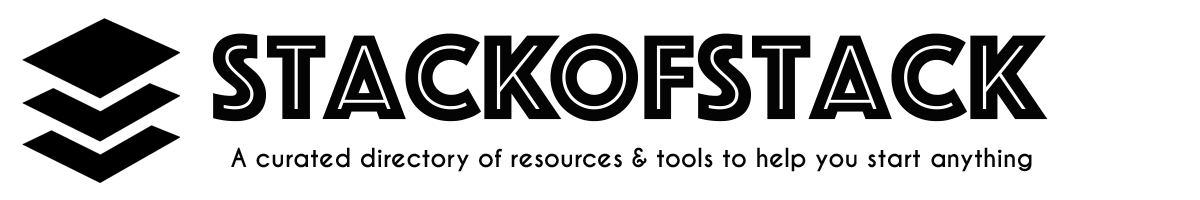
<style>
.page{position:relative;width:1200px;height:200px;background:#ffffff}
.page>*{position:absolute;margin:0}
.t1{font:125px "Phosphate-Inline";color:#040404}
.t2{font:24.6px "CaviarDreams-Bold";color:#040404}
</style>
<div class="page">
<p class="t1" style="left:212px;top:33px;width:836px;height:89px">stackofstack</p>
<p class="t2" style="left:231px;top:147px;width:801px;height:25px">A curated directory of resources &amp; tools to help you start anything</p>
</div>
